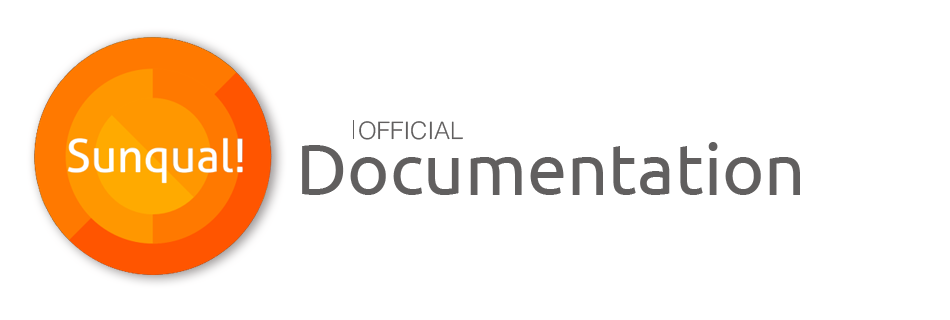
<style>
.page{position:relative;width:950px;height:320px;background:#ffffff}
.page>*{position:absolute;margin:0}
.t1{font:24px "Helvetica-Light";color:#615f5f}
.t2{font:72px "Ubuntu-Regular";color:#615f5f}
</style>
<div class="page">
<p class="t1" style="left:359px;top:121px;width:104px;height:19px">OFFICIAL</p>
<p class="t2" style="left:302px;top:142px;width:498px;height:53px">Documentation</p>
</div>
